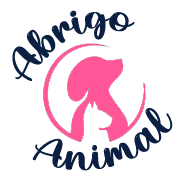
<style>
.page{position:relative;width:184px;height:185px;background:#ffffff}
.page>*{position:absolute;margin:0}
.t1{font:44px "ChristmasBellPersonalUse";color:#0a1f41}
</style>
<div class="page">
<p class="t1" style="left:12px;top:10px;width:123px;height:71px;rotate:-27deg">Abrigo</p>
<p class="t1" style="left:32px;top:108px;width:141px;height:63px;rotate:-14deg">Animal</p>
</div>
